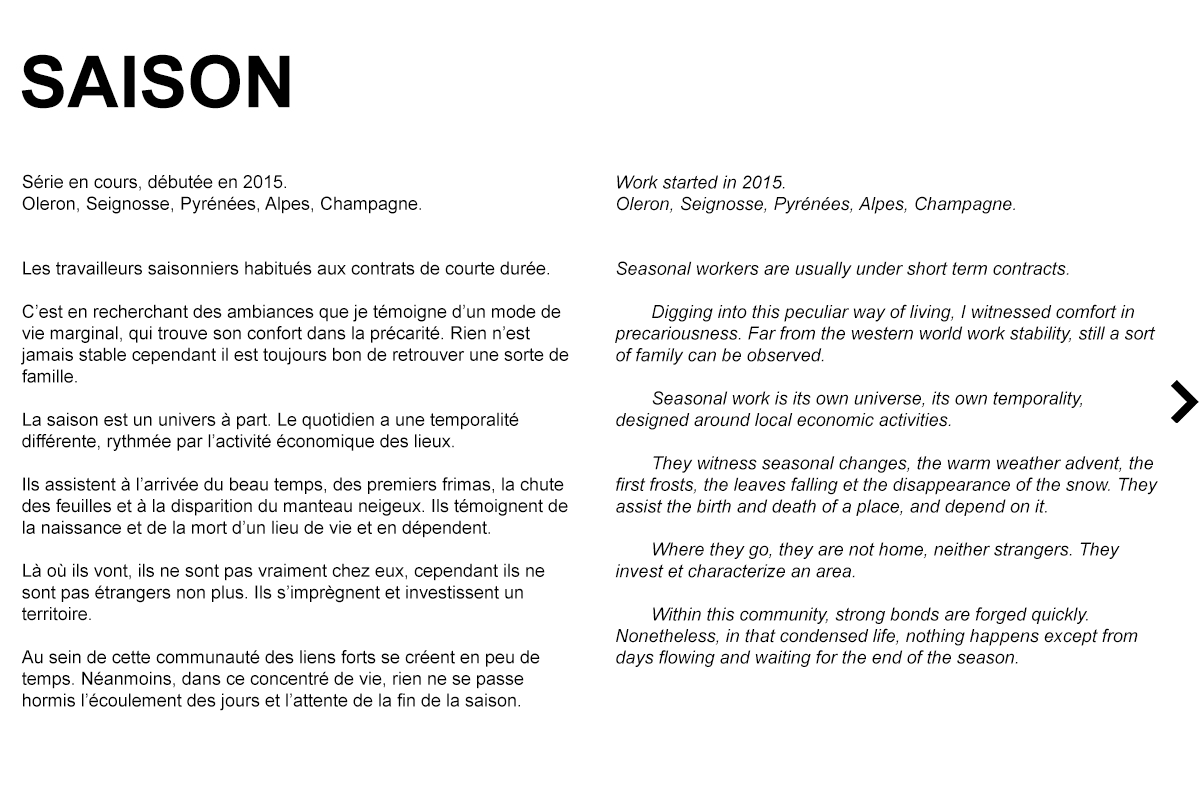
<style>
.page{position:relative;width:1200px;height:800px;background:#ffffff}
.page>*{position:absolute;margin:0}
.t1{font:18px "ArialMT";color:#000000}
.t2{font:18px "Arial-ItalicMT";color:#000000}
</style>
<div class="page">
<p class="t1" style="left:21px;top:174px;width:548px;height:537px">Série en cours, débutée en 2015.<br>Oleron, Seignosse, Pyrénées, Alpes, Champagne.<br><br><br>Les travailleurs saisonniers habitués aux contrats de courte durée.<br><br>C’est en recherchant des ambiances que je témoigne d’un mode de vie marginal, qui trouve son confort dans la précarité. Rien n’est jamais stable cependant il est toujours bon de retrouver une sorte de famille.<br><br>La saison est un univers à part. Le quotidien a une temporalité différente, rythmée par l’activité économique des lieux.<br><br>Ils assistent à l’arrivée du beau temps, des premiers frimas, la chute des feuilles et à la disparition du manteau neigeux. Ils témoignent de la naissance et de la mort d’un lieu de vie et en dépendent. <br><br>Là où ils vont, ils ne sont pas vraiment chez eux, cependant ils ne sont pas étrangers non plus. Ils s’imprègnent et investissent un territoire.<br><br>Au sein de cette communauté des liens forts se créent en peu de temps. Néanmoins, dans ce concentré de vie, rien ne se passe hormis l’écoulement des jours et l’attente de la fin de la saison.</p>
<p class="t2" style="left:615px;top:175px;width:543px;height:492px">Work started in 2015.<br>Oleron, Seignosse, Pyrénées, Alpes, Champagne.<br><br><br>Seasonal workers are usually under short term contracts.<br><br> Digging into this peculiar way of living, I witnessed comfort in precariousness. Far from the western world work stability, still a sort of family can be observed.<br><br> Seasonal work is its own universe, its own temporality, designed around local economic activities.<br><br> They witness seasonal changes, the warm weather advent, the first frosts, the leaves falling et the disappearance of the snow. They assist the birth and death of a place, and depend on it.<br><br> Where they go, they are not home, neither strangers. They invest et characterize an area.<br><br> Within this community, strong bonds are forged quickly. Nonetheless, in that condensed life, nothing happens except from days flowing and waiting for the end of the season.</p>
</div>
